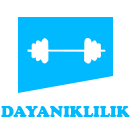
<style>
.page{position:relative;width:130px;height:128px;background:#ffffff}
.page>*{position:absolute;margin:0}
.t1{font:16px "CooperBlack";color:#00b9ff}
</style>
<div class="page">
<p class="t1" style="left:1px;top:106px;width:129px;height:11px">DAYANIKLILIK</p>
</div>
